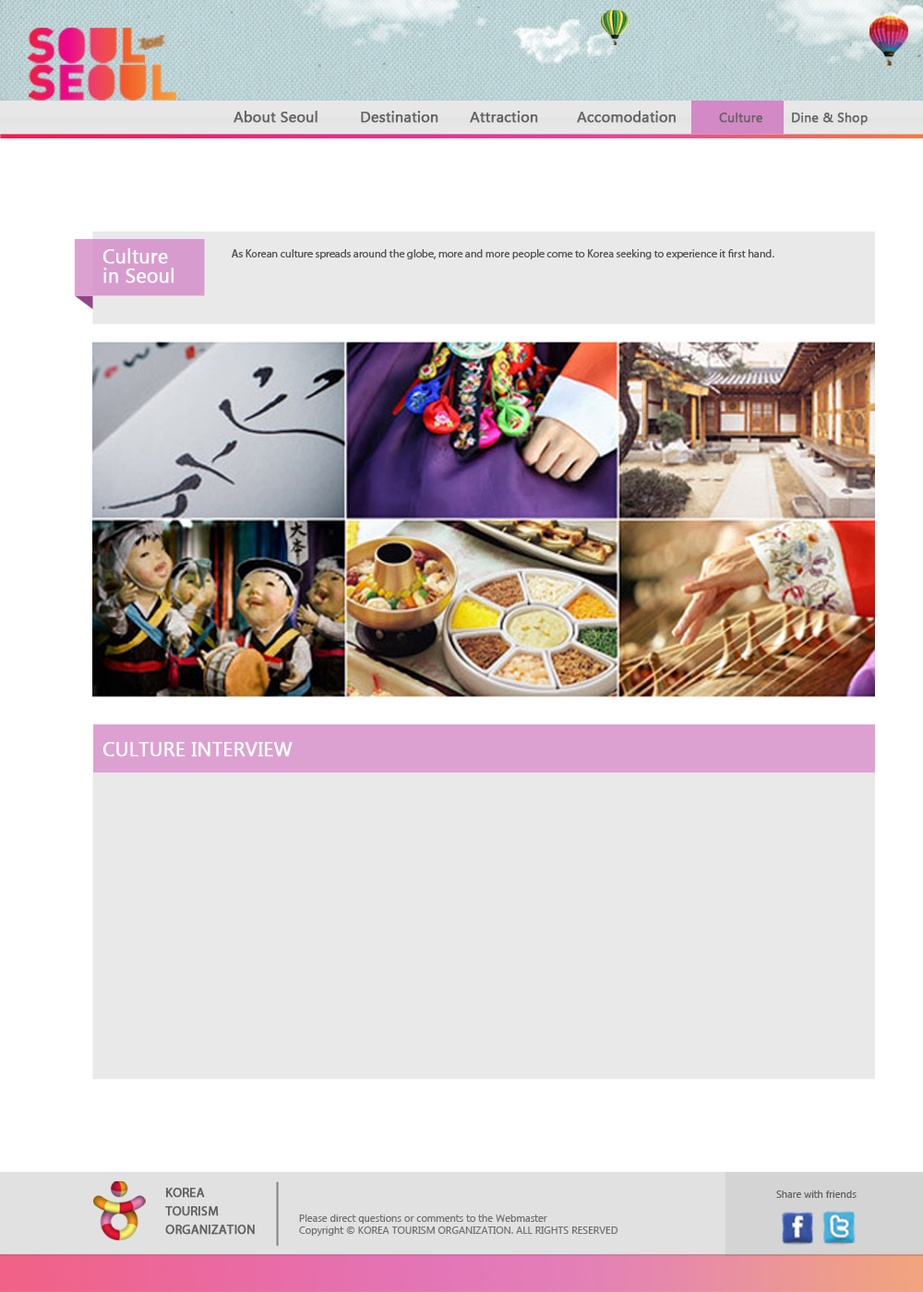
<style>
.page{position:relative;width:923px;height:1292px;background:#ffffff}
.page>*{position:absolute;margin:0}
.t1{font:14.8px "SegoeUI";color:#636363;font-weight:bold}
.t2{font:12.9px "SegoeUI";color:#636363;font-weight:bold}
.t3{font:19.4px/19.4px "SegoeUI";color:#ffffff;font-weight:bold}
.t4{font:11.1px "MyriadPro-Regular";color:#555555}
.t5{font:19.4px "SegoeUI";color:#ffffff;font-weight:bold}
.t6{font:12.9px/18.5px "MyriadPro-Regular";color:#636363;font-weight:bold}
.t7{font:10.2px "SegoeUI";color:#636363}
.t8{font:10.2px "SegoeUI";color:#707070}
</style>
<div class="page">
<p class="t1" style="left:233px;top:111px;width:84px;height:12px">About Seoul</p>
<p class="t1" style="left:361px;top:111px;width:77px;height:12px">Destination</p>
<p class="t1" style="left:470px;top:111px;width:68px;height:12px">Attraction</p>
<p class="t1" style="left:577px;top:111px;width:99px;height:12px">Accomodation</p>
<p class="t2" style="left:719px;top:113px;width:43px;height:10px">Culture</p>
<p class="t2" style="left:792px;top:113px;width:76px;height:13px">Dine &amp; Shop</p>
<p class="t3" style="left:103px;top:248px;width:71px;height:35px">Culture<br>in Seoul</p>
<p class="t4" style="left:232px;top:249px;width:542px;height:10px">As Korean culture spreads around the globe, more and more people come to Korea seeking to experience it first hand.</p>
<p class="t5" style="left:103px;top:742px;width:190px;height:15px">CULTURE INTERVIEW</p>
<p class="t6" style="left:165px;top:1188px;width:90px;height:47px">KOREA<br>TOURISM<br>ORGANIZATION</p>
<p class="t7" style="left:776px;top:1191px;width:80px;height:7px">Share with friends</p>
<p class="t8" style="left:299px;top:1215px;width:319px;height:21px">Please direct questions or comments to the Webmaster<br>Copyright © KOREA TOURISM ORGANIZATION. ALL RIGHTS RESERVED</p>
</div>
